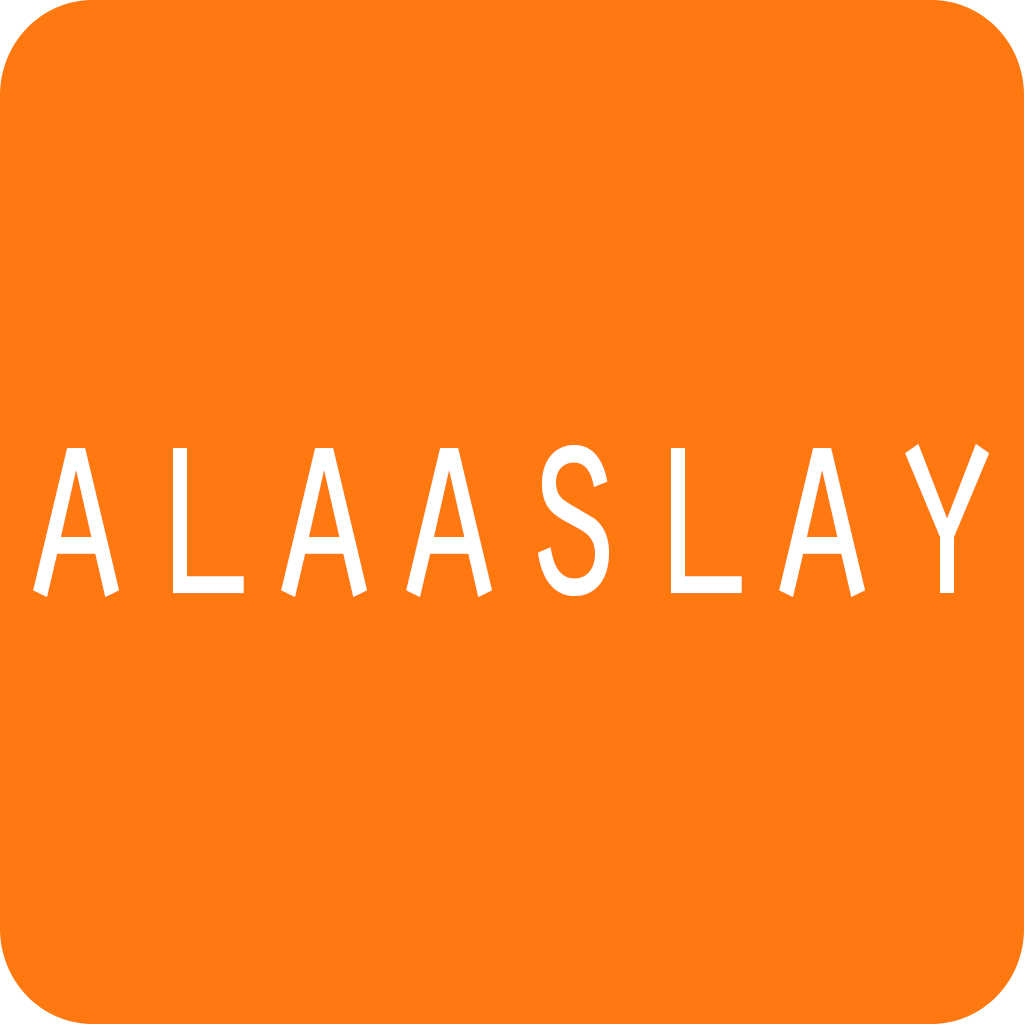
<style>
.page{position:relative;width:1024px;height:1024px;background:#ff7810}
.page>*{position:absolute;margin:0}
.t1{font:277.6px "OratorStd";color:#ffffff;scale:0.75 1}
</style>
<div class="page">
<p class="t1" style="left:33px;top:444px;width:957px;height:153px">alaaslay</p>
</div>
